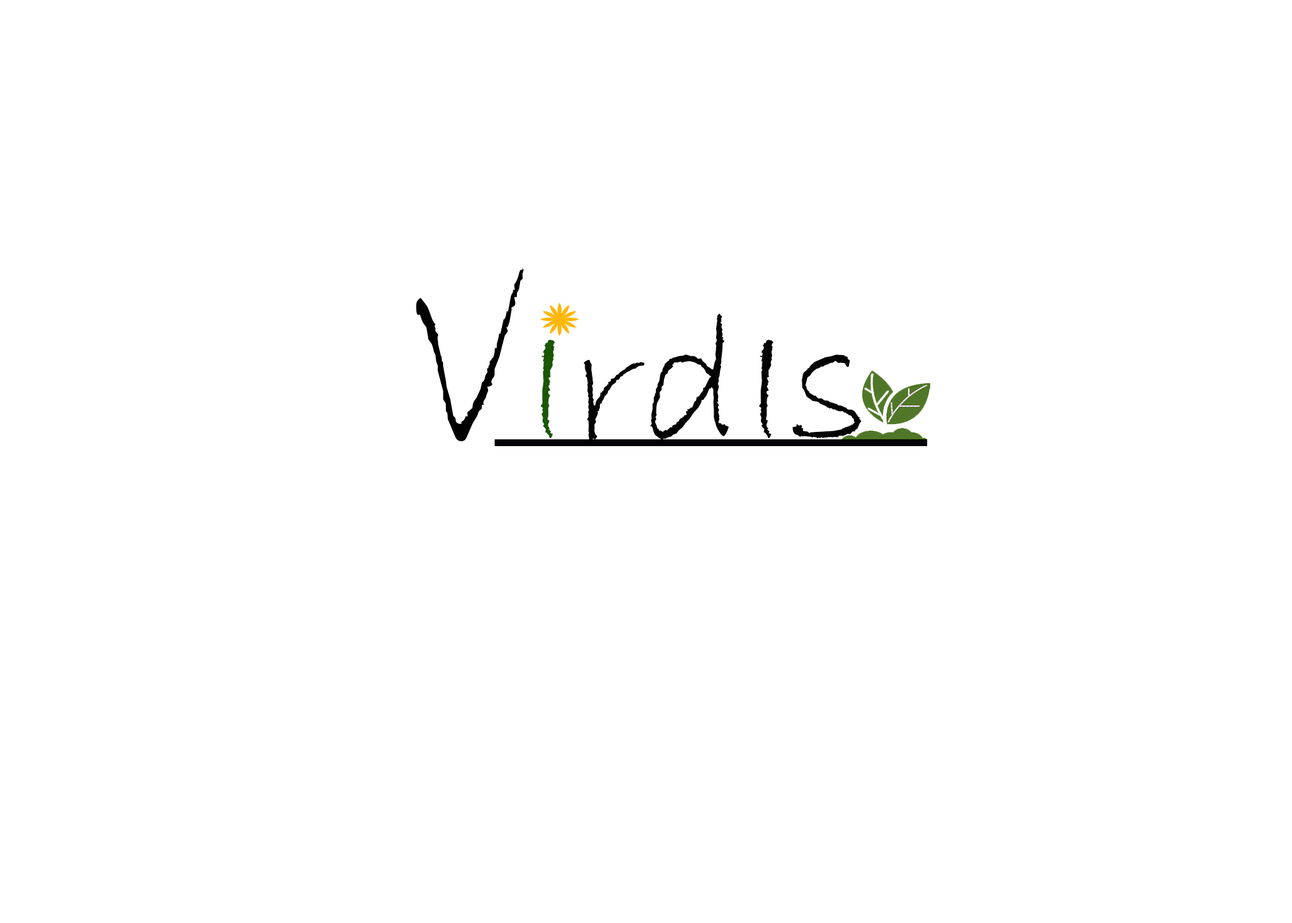
<style>
.page{position:relative;width:1292px;height:923px;background:#ffffff}
.page>*{position:absolute;margin:0}
.t1{font:184.6px "BradleyHandITC";color:#040404}
.t2{font:346.1px "BradleyHandITC";color:#010101;scale:0.67 1}
.t3{font:184.6px "BradleyHandITC";color:#195703}
</style>
<div class="page">
<p class="t1" style="left:416px;top:268px;width:445px;height:174px"><span class="t2">v</span><span class="t3">I</span>rdIs</p>
</div>
